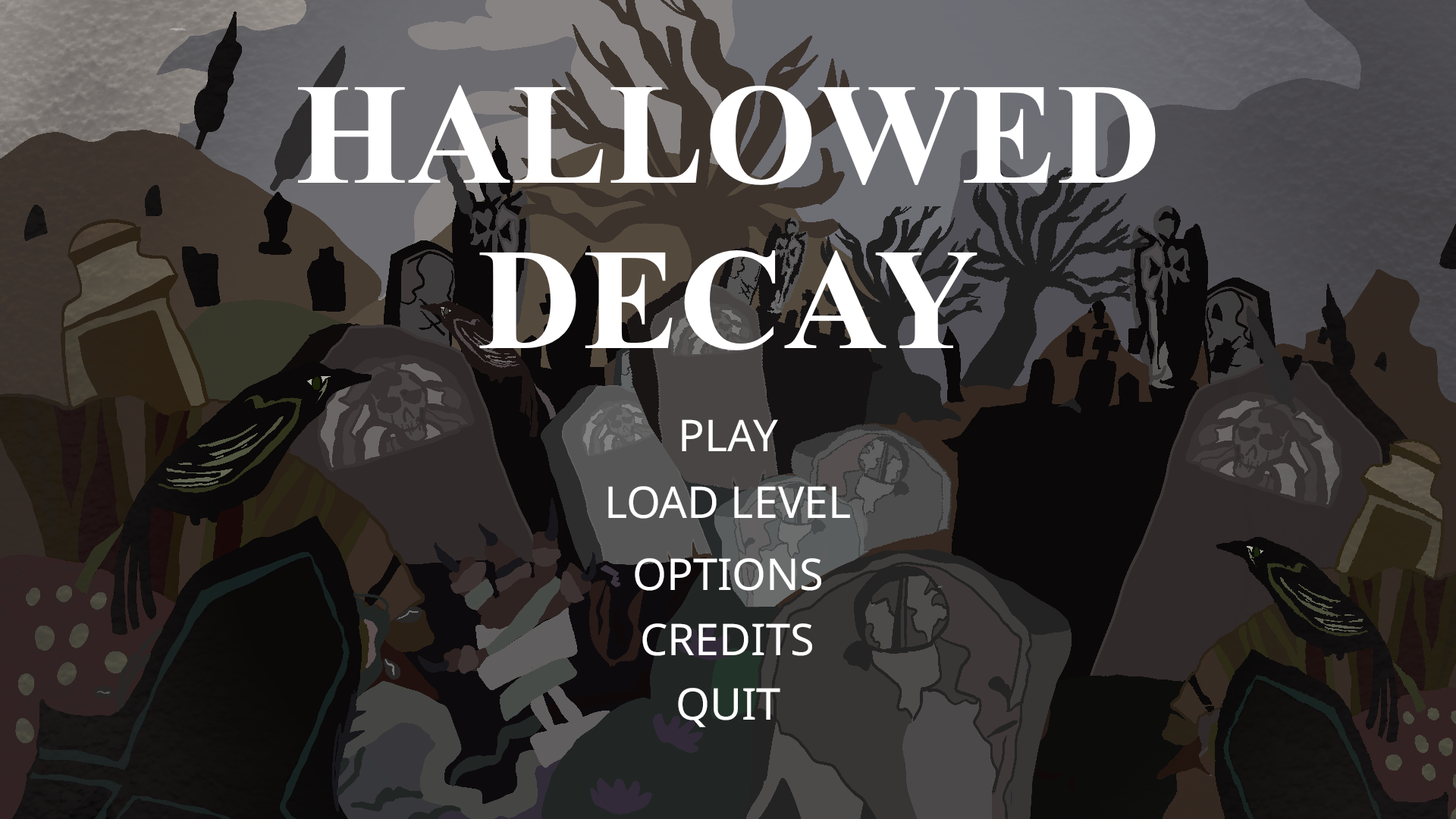
<style>
.page{position:relative;width:1456px;height:819px}
.page>*{position:absolute;margin:0}
.t1{font:144.4px "TimesNewRomanPS-BoldMT";color:#ffffff}
.t2{font:43.7px "NotoSans-Regular";color:#ffffff}
</style>
<div class="page">
<p class="t1" style="left:298px;top:85px;width:858px;height:265px;text-align:center">HALLOWED<br>DECAY</p>
<p class="t2" style="left:682px;top:419px;width:96px;height:32px">PLAY</p>
<p class="t2" style="left:608px;top:486px;width:242px;height:33px">LOAD LEVEL</p>
<p class="t2" style="left:635px;top:558px;width:186px;height:33px">OPTIONS</p>
<p class="t2" style="left:642px;top:623px;width:170px;height:33px">CREDITS</p>
<p class="t2" style="left:678px;top:688px;width:102px;height:39px">QUIT</p>
</div>
